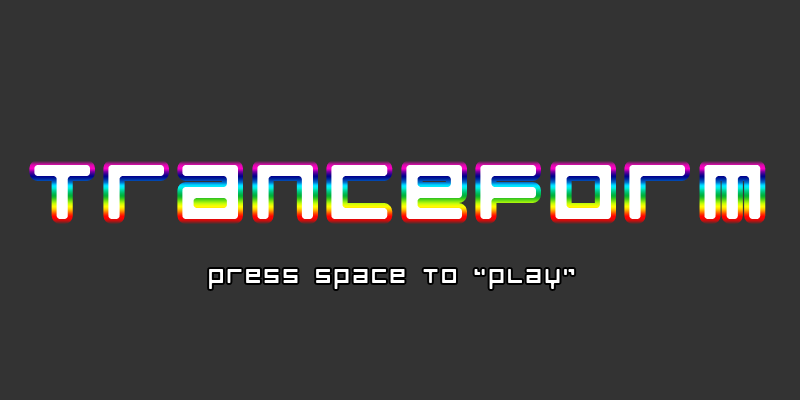
<style>
.page{position:relative;width:800px;height:400px;background:#333333}
.page>*{position:absolute;margin:0}
.t1{font:100px "RazerRegular";letter-spacing:0.1em;color:#ffffff;text-transform:uppercase}
.t2{font:25px "RazerRegular";letter-spacing:0.1em;color:#ffffff;text-transform:uppercase}
</style>
<div class="page">
<p class="t1" style="left:34px;top:165px;width:727px;height:54px">Tranceform</p>
<p class="t2" style="left:209px;top:269px;width:366px;height:20px">press space to “play”</p>
</div>
